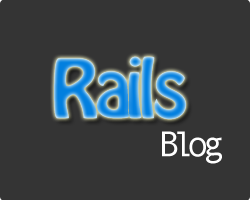
<style>
.page{position:relative;width:250px;height:200px;background:#343434}
.page>*{position:absolute;margin:0}
.t1{font:72px "HoboStd"}
.t2{font:36px "AndaleMono";color:#ffffff}
</style>
<div class="page">
<p class="t1" style="left:54px;top:56px;width:132px;height:64px">Rails</p>
<p class="t2" style="left:162px;top:131px;width:60px;height:33px">Blog</p>
</div>
